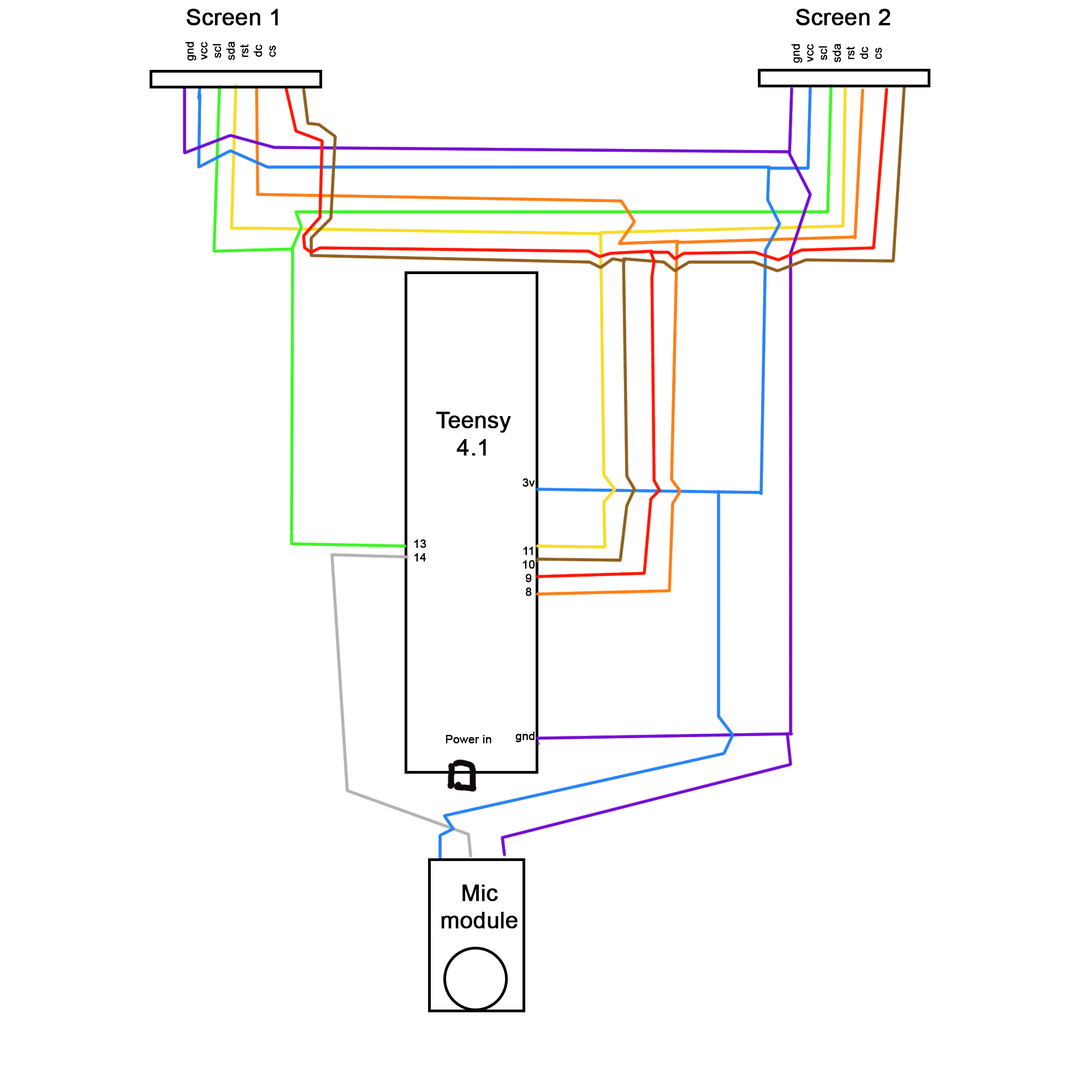
<style>
.page{position:relative;width:1092px;height:1092px;background:#ffffff}
.page>*{position:absolute;margin:0}
.t1{font:22.7px "ArialMT";color:#000000;font-weight:bold}
.t2{font:11.4px "ArialMT";color:#000000;font-weight:bold}
</style>
<div class="page">
<p class="t1" style="left:186px;top:9px;width:92px;height:17px">Screen 1</p>
<p class="t1" style="left:796px;top:9px;width:95px;height:17px">Screen 2</p>
<p class="t2" style="left:185px;top:41px;width:91px;height:20px;text-align:center;rotate:-90deg">gnd<br>vcc<br>scl<br>sda<br>rst<br>dc <br>cs</p>
<p class="t2" style="left:791px;top:44px;width:91px;height:19px;text-align:center;rotate:-90deg">gnd<br>vcc<br>scl<br>sda<br>rst<br>dc <br>cs</p>
<p class="t1" style="left:436px;top:412px;width:75px;height:44px;text-align:center">Teensy<br>4.1</p>
<p class="t2" style="left:523px;top:478px;width:12px;height:118px;text-align:center">3v<br><br><br><br><br>11<br>10<br>9<br>8</p>
<p class="t2" style="left:414px;top:539px;width:12px;height:23px;text-align:center">13<br>14</p>
<p class="t2" style="left:446px;top:735px;width:45px;height:9px">Power in</p>
<p class="t2" style="left:515px;top:732px;width:20px;height:11px">gnd</p>
<p class="t1" style="left:441px;top:885px;width:77px;height:44px;text-align:center">Mic module</p>
</div>
